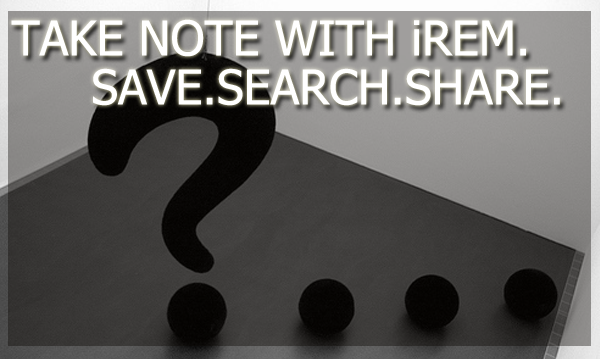
<style>
.page{position:relative;width:600px;height:359px}
.page>*{position:absolute;margin:0}
.t1{font:48px "Tahoma";color:#ffffff}
</style>
<div class="page">
<p class="t1" style="left:11px;top:19px;width:515px;height:38px">TAKE NOTE WITH iREM.</p>
<p class="t1" style="left:93px;top:68px;width:467px;height:38px">SAVE.SEARCH.SHARE.</p>
</div>
